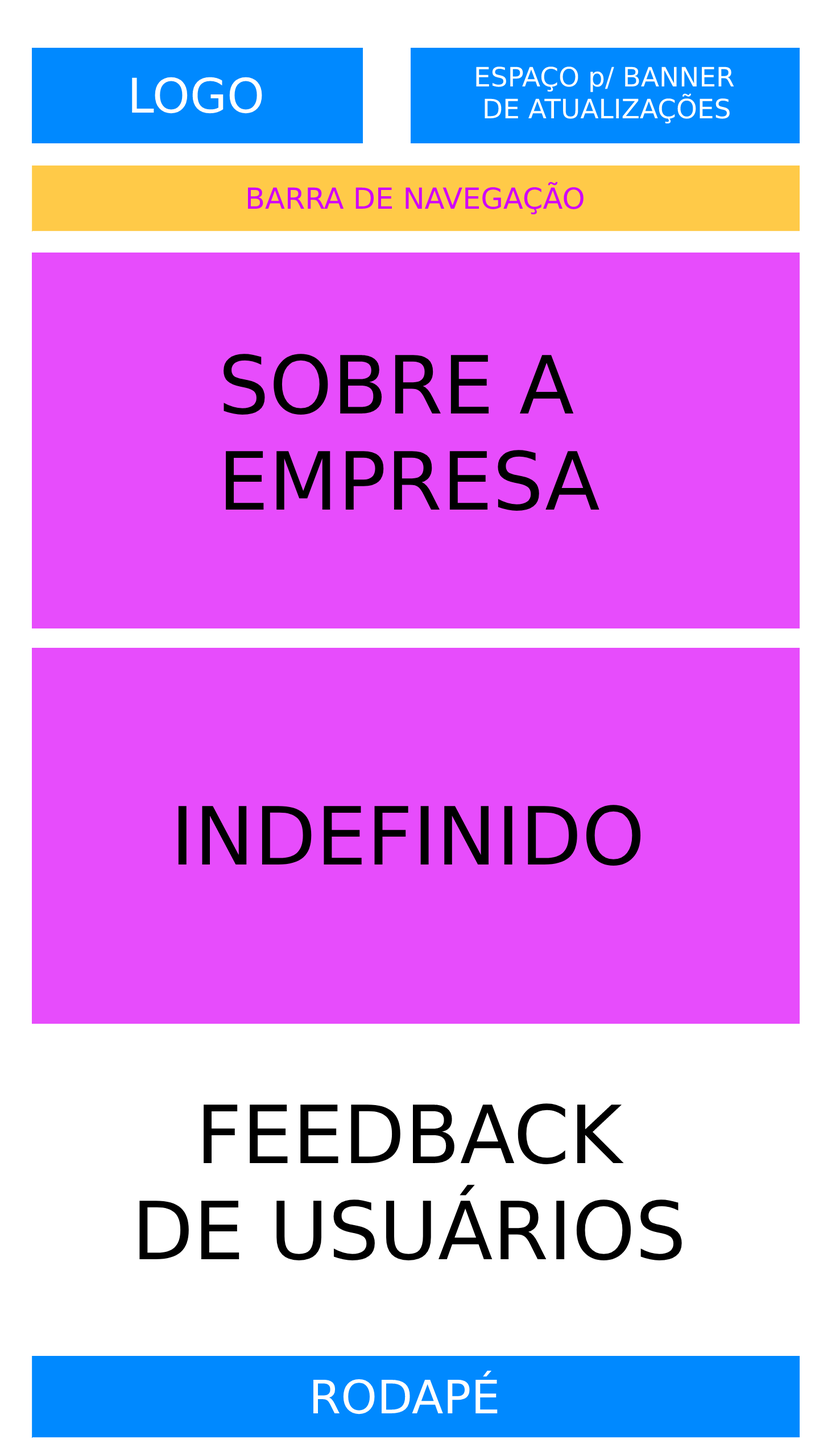
<style>
.page{position:relative;width:819px;height:1456px;background:#e74cfc}
.page>*{position:absolute;margin:0}
.t1{font:47.8px "DejaVuSans";color:#ffffff}
.t2{font:26.7px "DejaVuSans";color:#ffffff}
.t3{font:29px "DejaVuSans";color:#d001fb}
.t4{font:80.2px "DejaVuSans";color:#000000}
.t5{font:46.1px "DejaVuSans";color:#ffffff}
</style>
<div class="page">
<p class="t1" style="left:132px;top:77px;width:130px;height:37px">LOGO</p>
<p class="t2" style="left:476px;top:67px;width:258px;height:57px">ESPAÇO p/ BANNER<br> DE ATUALIZAÇÕES</p>
<p class="t3" style="left:248px;top:182px;width:336px;height:32px">BARRA DE NAVEGAÇÃO</p>
<p class="t4" style="left:224px;top:354px;width:375px;height:157px;text-align:center">SOBRE A <br>EMPRESA</p>
<p class="t4" style="left:178px;top:805px;width:463px;height:61px">INDEFINIDO</p>
<p class="t4" style="left:139px;top:1103px;width:543px;height:157px;text-align:center">FEEDBACK<br>DE USUÁRIOS</p>
<p class="t5" style="left:313px;top:1370px;width:185px;height:44px">RODAPÉ</p>
</div>
